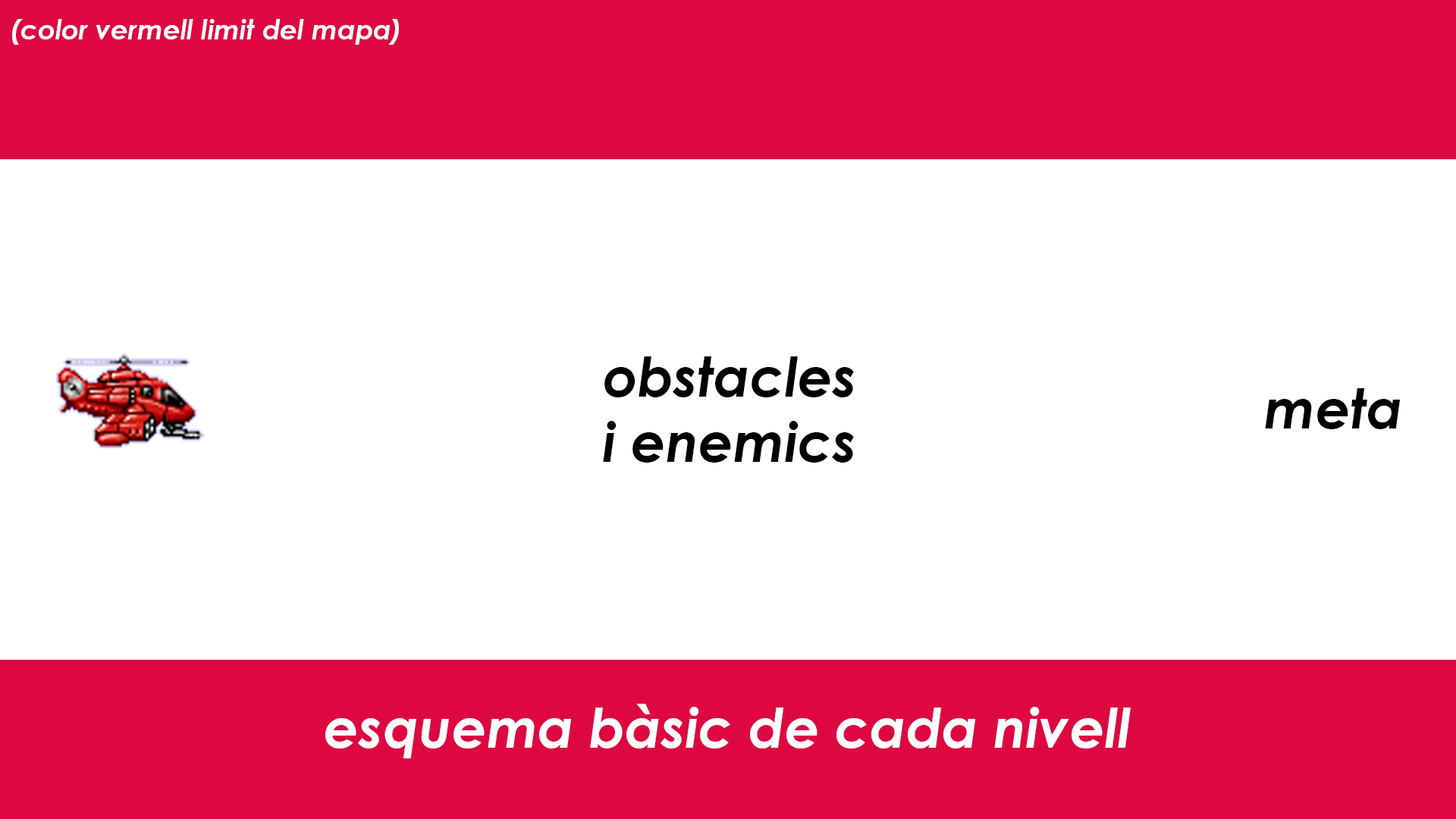
<style>
.page{position:relative;width:1456px;height:819px;background:#ffffff}
.page>*{position:absolute;margin:0}
.t1{font:27.3px "CenturyGothic-BoldItalic";color:#ffffff}
.t2{font:54.6px "CenturyGothic-BoldItalic";color:#000000}
.t3{font:54.6px "CenturyGothic-BoldItalic";color:#ffffff}
</style>
<div class="page">
<p class="t1" style="left:12px;top:19px;width:387px;height:26px">(color vermell limit del mapa)</p>
<p class="t2" style="left:603px;top:356px;width:251px;height:107px">obstacles<br>i enemics</p>
<p class="t2" style="left:1265px;top:388px;width:136px;height:41px">meta</p>
<p class="t3" style="left:325px;top:704px;width:806px;height:54px">esquema bàsic de cada nivell</p>
</div>
